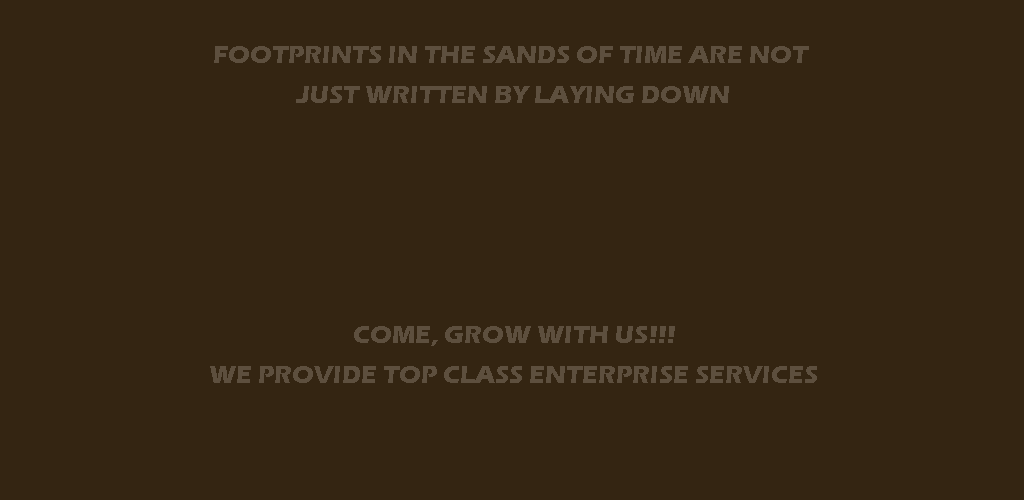
<style>
.page{position:relative;width:1024px;height:500px;background:#342512}
.page>*{position:absolute;margin:0}
.t1{font:25px/40px "ErasITC-Bold";color:#5d4f3e}
</style>
<div class="page">
<p class="t1" style="left:210px;top:46px;width:607px;height:337px;text-align:center">FOOTPRINTS IN THE SANDS OF TIME ARE NOT <br>JUST WRITTEN BY LAYING DOWN<br><br><br><br><br><br>COME, GROW WITH US!!!<br>WE PROVIDE TOP CLASS ENTERPRISE SERVICES</p>
</div>
